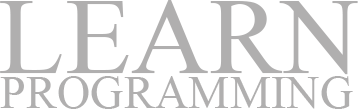
<style>
.page{position:relative;width:358px;height:109px;background:#ffffff}
.page>*{position:absolute;margin:0}
.t1{font:108.6px "TimesNewRomanPSMT";color:#b0afaf;text-transform:uppercase}
.t2{font:46.4px "TimesNewRomanPSMT";color:#b0afaf;text-transform:uppercase}
</style>
<div class="page">
<p class="t1" style="left:0px;top:0px;width:358px;height:75px">LEARN</p>
<p class="t2" style="left:0px;top:76px;width:353px;height:33px">Programming</p>
</div>
